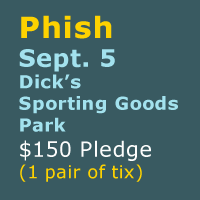
<style>
.page{position:relative;width:200px;height:200px;background:#395a61}
.page>*{position:absolute;margin:0}
.t1{font:18px "Verdana-Bold";letter-spacing:0.018em;color:#a3e2ee}
.t2{font:29px "Verdana-Bold";letter-spacing:0.018em;color:#fed200;font-weight:bold}
.t3{font:24px "Verdana-Bold";letter-spacing:0.018em;color:#a3e2ee}
.t4{font:21px "Verdana";letter-spacing:0.018em;color:#fdfdfc}
.t5{font:18px "Verdana";letter-spacing:0.018em;color:#fed200}
</style>
<div class="page">
<p class="t1" style="left:19px;top:15px;width:159px;height:167px"><span class="t2">Phish<br></span><span class="t3">Sept. 5 <br></span>Dick’s <br>Sporting Goods <br>Park<br><span class="t4">$150 Pledge<br></span><span class="t5">(1 pair of tix)</span></p>
</div>
